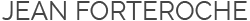
<style>
.page{position:relative;width:250px;height:21px;background:#ffffff}
.page>*{position:absolute;margin:0}
.t1{font:26px "Raleway";color:#454545}
</style>
<div class="page">
<p class="t1" style="left:2px;top:1px;width:245px;height:19px">JEAN FORTEROCHE</p>
</div>
